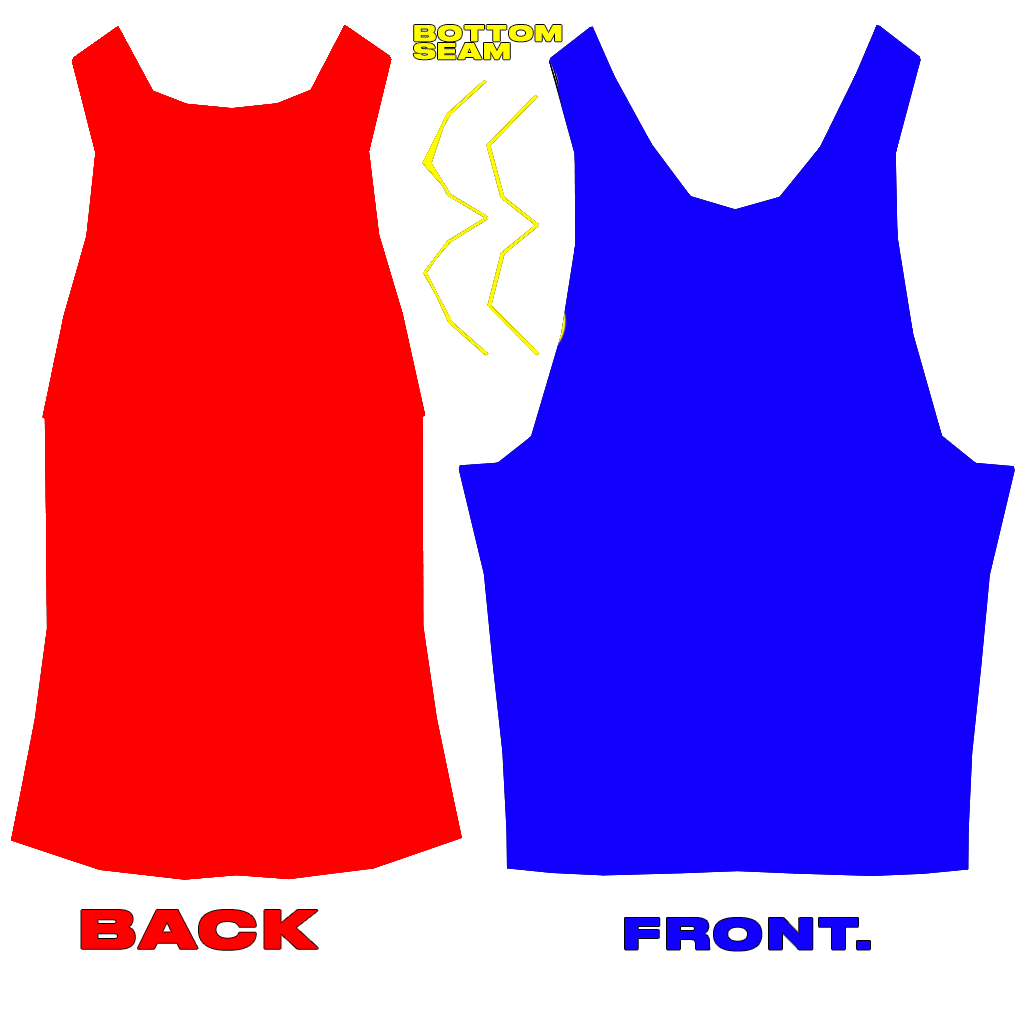
<style>
.page{position:relative;width:1024px;height:1024px;background:#ffffff}
.page>*{position:absolute;margin:0}
.t1{font:20.4px/18px "DrukWide-Bold";letter-spacing:0.1em;color:#fffc00;text-transform:uppercase;font-weight:bold}
.t2{font:51px "DrukWide-Bold";letter-spacing:0.1em;color:#ff0000;text-transform:uppercase;font-weight:bold}
.t3{font:41px "DrukWide-Bold";letter-spacing:0.1em;color:#1200ff;text-transform:uppercase;font-weight:bold}
</style>
<div class="page">
<p class="t1" style="left:413px;top:25px;width:149px;height:35px">Bottom <br>SEAM</p>
<p class="t2" style="left:81px;top:910px;width:237px;height:40px">BACK</p>
<p class="t3" style="left:625px;top:918px;width:245px;height:33px">Front.</p>
</div>
